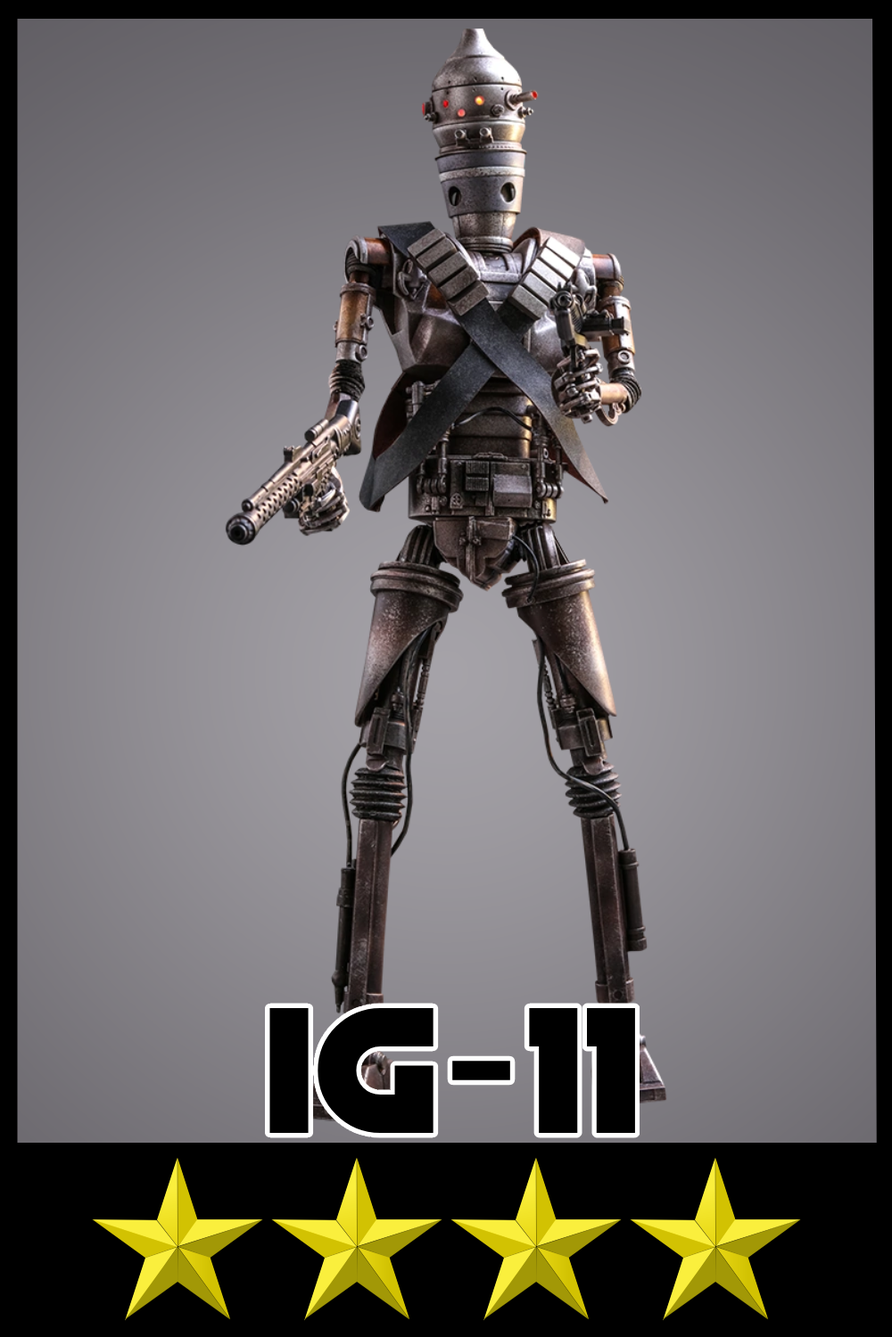
<style>
.page{position:relative;width:892px;height:1337px}
.page>*{position:absolute;margin:0}
.t1{font:192.1px "DistantGalaxy";color:#000000}
</style>
<div class="page">
<p class="t1" style="left:269px;top:1008px;width:366px;height:126px">iG-11</p>
</div>
